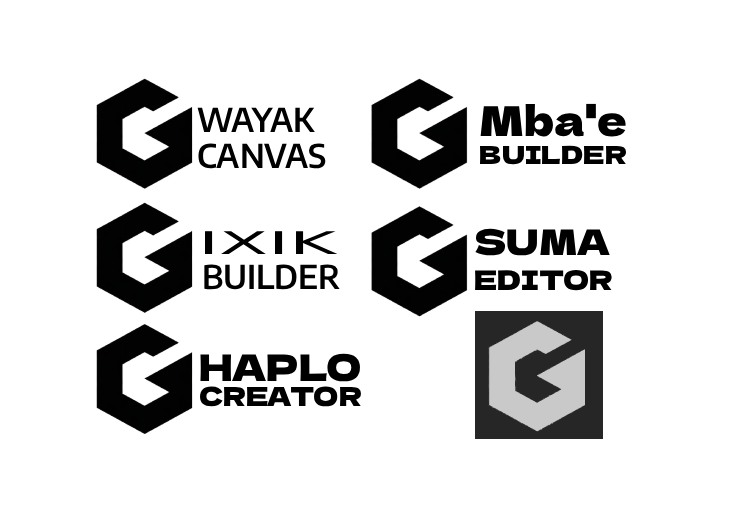
<style>
.page{position:relative;width:731px;height:523px;background:#ffffff}
.page>*{position:absolute;margin:0}
.t1{font:32.7px "EncodeSans-SemiBold";color:#000000}
.t2{font:41.1px "DelaGothicOne-Regular";color:#000000}
.t3{font:24.9px "DelaGothicOne-Regular";color:#000000}
.t4{font:31.3px "DejaVuSans";color:#000000;scale:2.29 1}
.t5{font:35.2px "DelaGothicOne-Regular";color:#000000}
.t6{font:26.9px "DelaGothicOne-Regular";color:#000000}
.t7{font:36.5px "DelaGothicOne-Regular";color:#000000}
.t8{font:26px "DelaGothicOne-Regular";color:#000000}
</style>
<div class="page">
<p class="t1" style="left:197px;top:107px;width:118px;height:25px">WAYAK</p>
<p class="t2" style="left:480px;top:103px;width:146px;height:34px">Mba'e</p>
<p class="t1" style="left:198px;top:143px;width:128px;height:26px">CANVAS</p>
<p class="t3" style="left:480px;top:145px;width:146px;height:20px">BUILDER</p>
<p class="t4" style="left:205px;top:231px;width:133px;height:23px">IXIK</p>
<p class="t5" style="left:475px;top:228px;width:135px;height:28px">SUMA</p>
<p class="t1" style="left:204px;top:264px;width:136px;height:26px">BUILDER</p>
<p class="t6" style="left:475px;top:270px;width:137px;height:21px">EDITOR</p>
<p class="t7" style="left:200px;top:353px;width:160px;height:29px">HAPLO</p>
<p class="t8" style="left:200px;top:386px;width:161px;height:21px">CREATOR</p>
</div>
